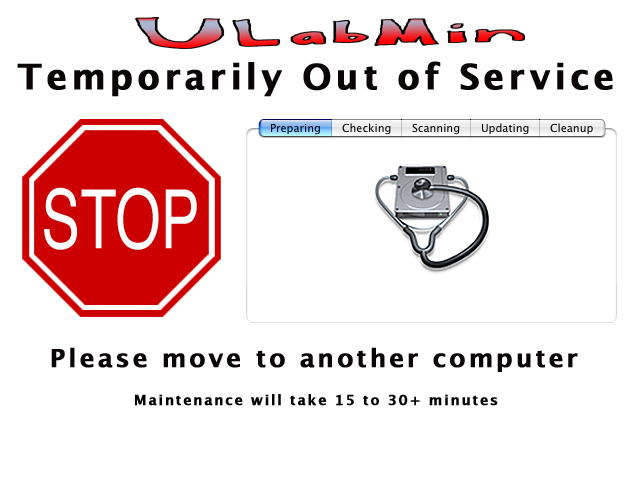
<style>
.page{position:relative;width:640px;height:480px;background:#ffffff}
.page>*{position:absolute;margin:0}
.t1{font:35px "LucidaGrande-Bold";letter-spacing:0.1em;color:#0a0606;font-weight:bold}
.t2{font:82px "Helvetica";color:#ffffff;scale:0.71 1}
.t3{font:25px "LucidaGrande-Bold";letter-spacing:0.1em;color:#0a0606;font-weight:bold}
.t4{font:14px "LucidaGrande-Bold";letter-spacing:0.1em;color:#020202;font-weight:bold}
</style>
<div class="page">
<p class="t1" style="left:17px;top:61px;width:596px;height:36px">Temporarily Out of Service</p>
<p class="t2" style="left:44px;top:187px;width:153px;height:63px">STOP</p>
<p class="t3" style="left:51px;top:347px;width:527px;height:25px">Please move to another computer</p>
<p class="t4" style="left:135px;top:394px;width:363px;height:12px">Maintenance will take 15 to 30+ minutes</p>
</div>
